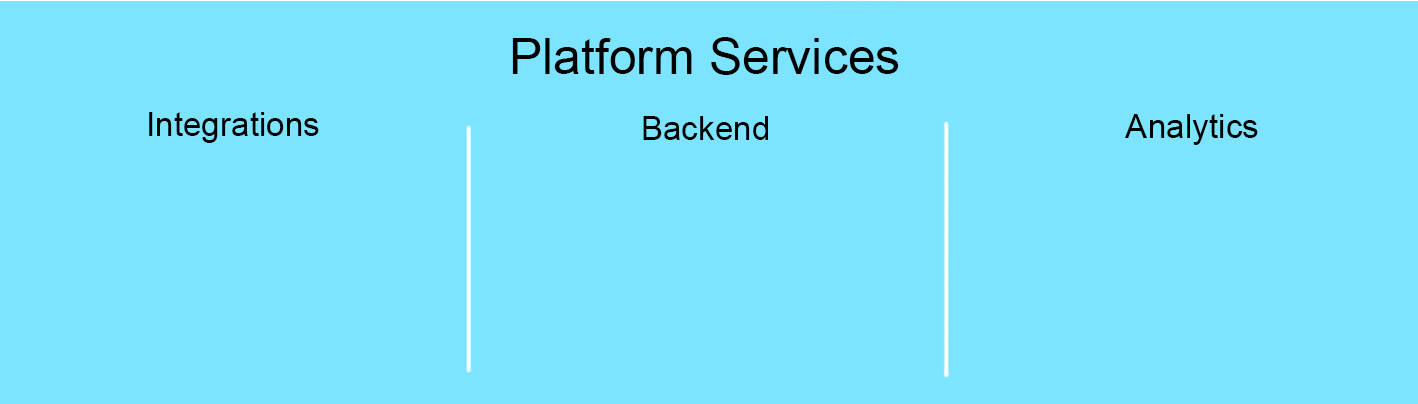
<style>
.page{position:relative;width:1418px;height:404px;background:#7ce4ff}
.page>*{position:absolute;margin:0}
.t1{font:50px "ArialMT";color:#000000}
.t2{font:33.3px "ArialMT";color:#000000}
</style>
<div class="page">
<p class="t1" style="left:512px;top:37px;width:387px;height:38px">Platform Services</p>
<p class="t2" style="left:149px;top:112px;width:170px;height:31px">Integrations</p>
<p class="t2" style="left:643px;top:116px;width:125px;height:24px">Backend</p>
<p class="t2" style="left:1125px;top:114px;width:133px;height:31px">Analytics</p>
</div>
